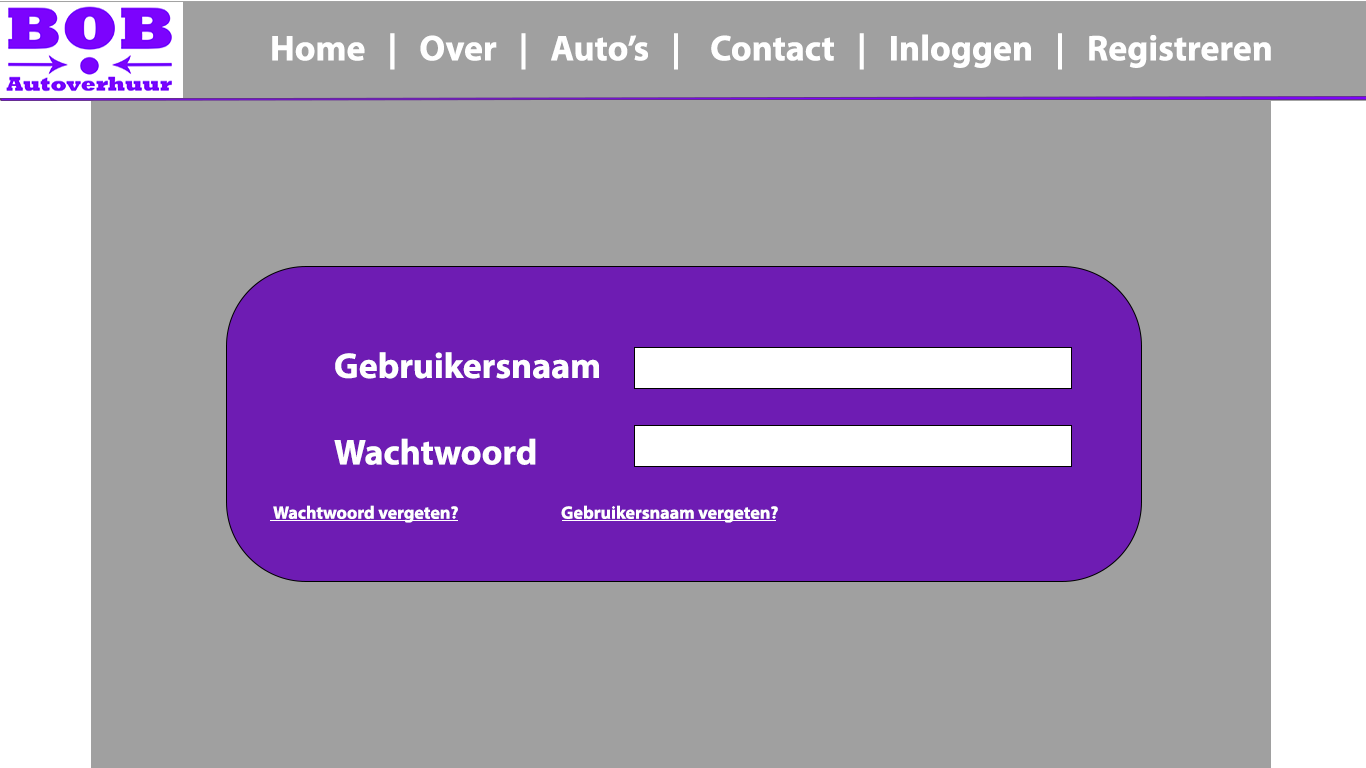
<style>
.page{position:relative;width:1366px;height:768px;background:#a0a0a0}
.page>*{position:absolute;margin:0}
.t1{font:36px "MyriadPro-Bold";color:#ffffff}
.t2{font:36px "MyriadPro-Bold";color:#00ff00}
.t3{font:18px "MyriadPro-Bold";color:#ffffff}
</style>
<div class="page">
<p class="t1" style="left:272px;top:33px;width:999px;height:37px">Home   |   Over   |   Auto’s   |    Contact   |   Inloggen   |   Registreren</p>
<p class="t1" style="left:334px;top:352px;width:265px;height:113px"><span class="t2"><br>   <br>   </span>Gebruikersnaam<br><br>   Wachtwoord</p>
<p class="t3" style="left:273px;top:505px;width:505px;height:18px">Wachtwoord vergeten?   Gebruikersnaam vergeten?</p>
</div>
